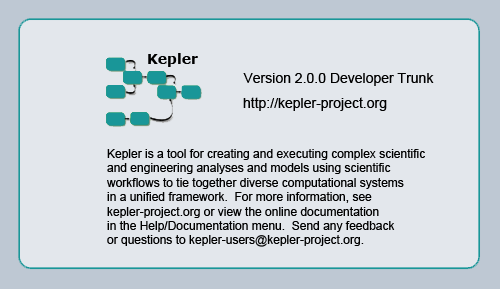
<style>
.page{position:relative;width:500px;height:289px;background:#e3e7ec}
.page>*{position:absolute;margin:0}
.t1{font:14px "ArialMT";color:#000000}
.t2{font:12px "ArialMT";color:#000000}
</style>
<div class="page">
<p class="t1" style="left:243px;top:73px;width:191px;height:13px">Version 2.0.0 Developer Trunk</p>
<p class="t1" style="left:243px;top:97px;width:144px;height:14px">http://kepler-project.org</p>
<p class="t2" style="left:107px;top:149px;width:318px;height:98px">Kepler is a tool for creating and executing complex scientific <br>and engineering analyses and models using scientific <br>workflows to tie together diverse computational systems <br>in a unified framework.  For more information, see<br>kepler-project.org or view the online documentation<br>in the Help/Documentation menu.  Send any feedback<br>or questions to kepler-users@kepler-project.org.</p>
</div>
